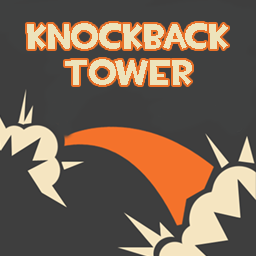
<style>
.page{position:relative;width:256px;height:256px;background:#3e3e3e}
.page>*{position:absolute;margin:0}
.t1{font:36px/36px "TF2Build";color:#ede3bb}
</style>
<div class="page">
<p class="t1" style="left:27px;top:23px;width:201px;height:62px;text-align:center">Knockback<br>Tower</p>
</div>
